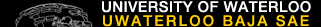
<style>
.page{position:relative;width:321px;height:27px;background:#000000}
.page>*{position:absolute;margin:0}
.t1{font:15px "HelveticaNeue-Medium";letter-spacing:0.03em;color:#ffffff}
.t2{font:15px "HelveticaNeue-Medium";letter-spacing:0.14em;color:#ffcc00}
</style>
<div class="page">
<p class="t1" style="left:102px;top:1px;width:209px;height:12px">UNIVERSITY OF WATERLOO</p>
<p class="t2" style="left:103px;top:15px;width:206px;height:12px">UWATERLOO BAJA SAE</p>
</div>
